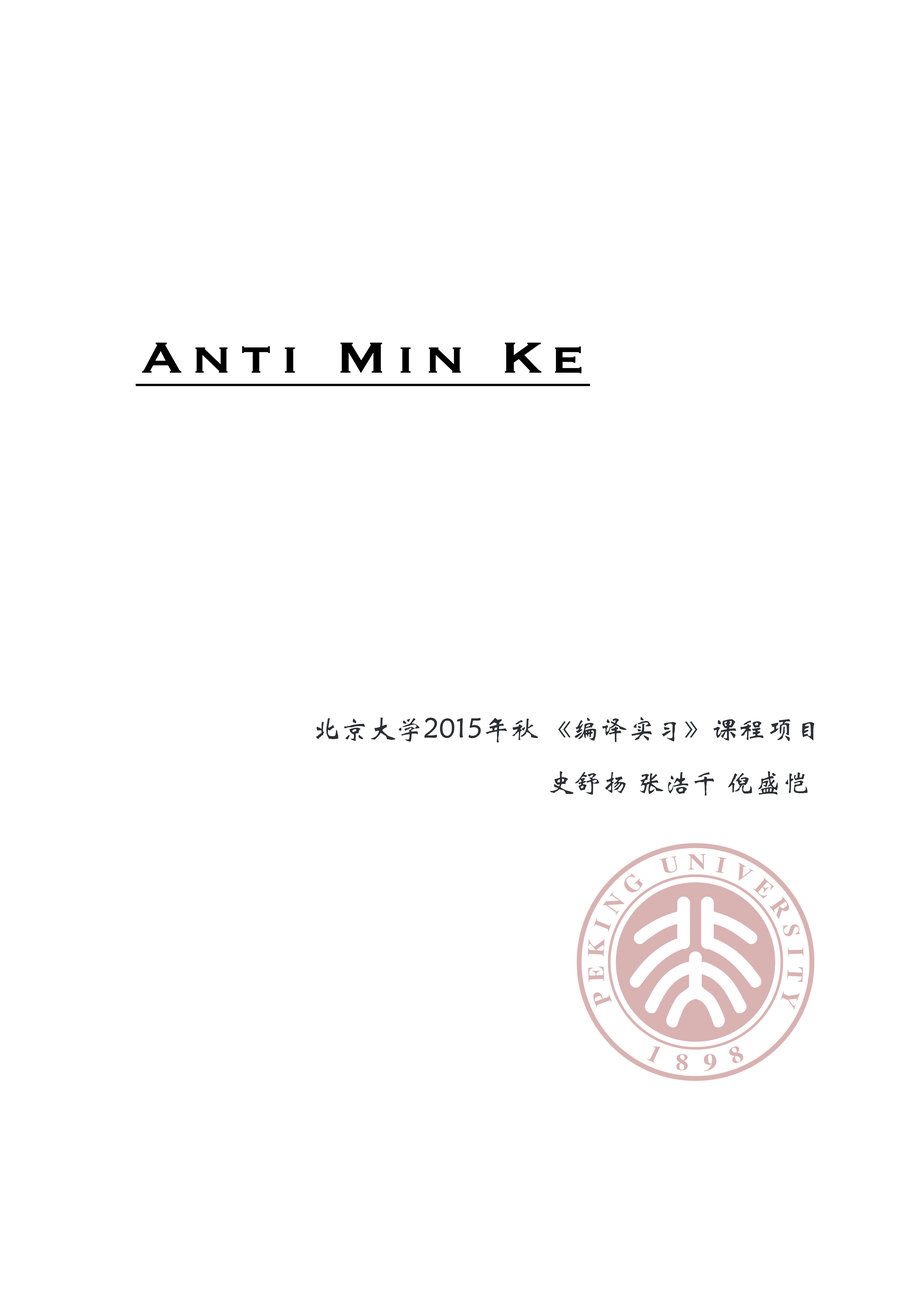
<style>
.page{position:relative;width:918px;height:1299px;background:#ffffff}
.page>*{position:absolute;margin:0}
.t1{font:27.8px "STXinwei";color:#2c2f34}
</style>
<div class="page">
<p class="t1" style="left:316px;top:717px;width:499px;height:25px">北京大学2015年秋 《编译实习》课程项目</p>
<p class="t1" style="left:550px;top:771px;width:258px;height:25px">史舒扬 张浩千 倪盛恺</p>
</div>
